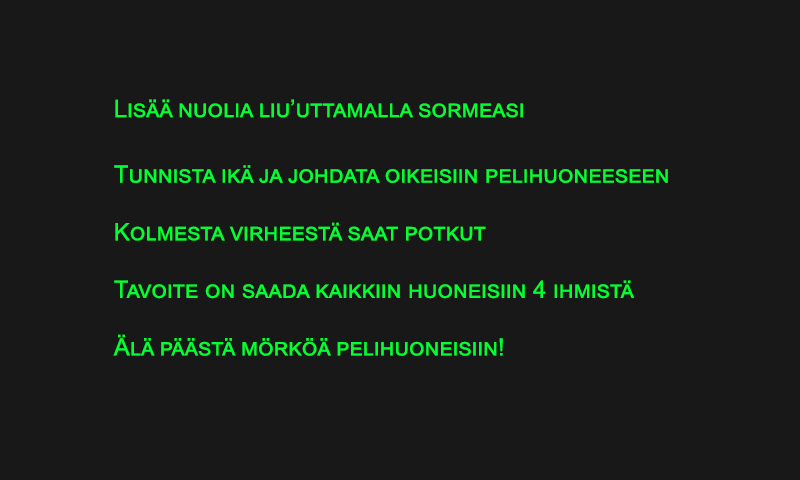
<style>
.page{position:relative;width:800px;height:480px;background:#181818}
.page>*{position:absolute;margin:0}
.t1{font:24px "ArialMT";color:#03ff32;font-variant:small-caps}
</style>
<div class="page">
<p class="t1" style="left:113px;top:99px;width:555px;height:257px">Lisää nuolia liu’uttamalla sormeasi<br><br>Tunnista ikä ja johdata oikeisiin pelihuoneeseen<br><br>Kolmesta virheestä saat potkut<br><br>Tavoite on saada kaikkiin huoneisiin 4 ihmistä<br><br>Älä päästä mörköä pelihuoneisiin!</p>
</div>
